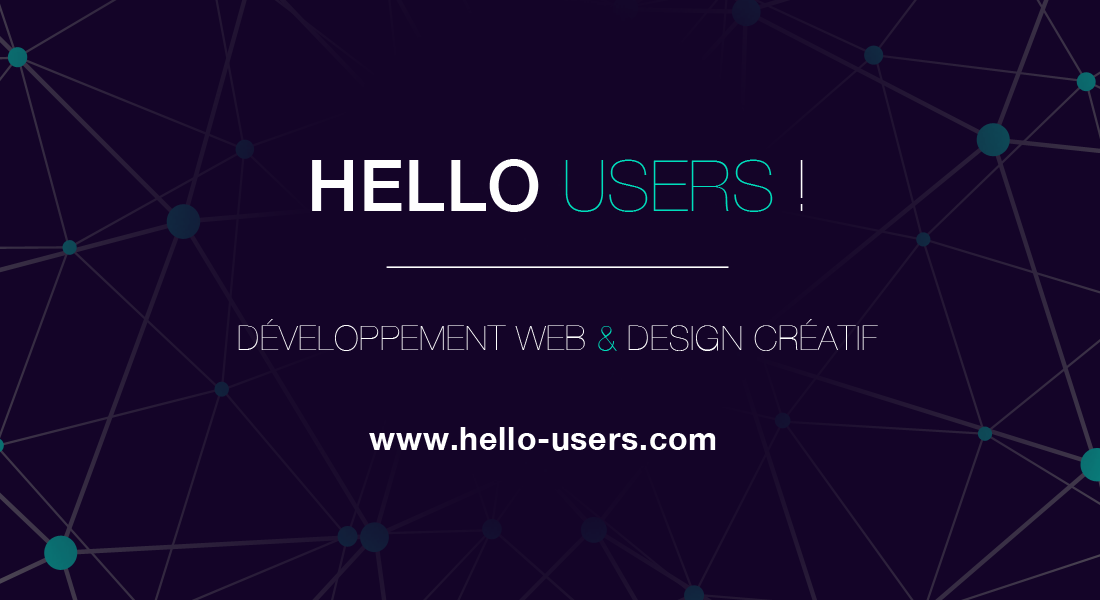
<style>
.page{position:relative;width:1100px;height:600px;background:#140428}
.page>*{position:absolute;margin:0}
.t1{font:71.1px "HelveticaNeue-Medium";letter-spacing:0.01em;color:#fefefe;text-transform:uppercase}
.t2{font:71.1px "HelveticaNeue-UltraLight";color:#00debc;text-transform:uppercase}
.t3{font:71.1px "HelveticaNeue-UltraLight";color:#fefefe;text-transform:uppercase}
.t4{font:33.8px "HelveticaNeue-UltraLight";letter-spacing:0.025em;color:#ffffff;text-transform:uppercase}
.t5{font:33.8px "HelveticaNeue-UltraLight";letter-spacing:0.025em;color:#00debc;text-transform:uppercase}
.t6{font:32px "HelveticaNeue-Bold";letter-spacing:0.025em;color:#ffffff}
</style>
<div class="page">
<p class="t1" style="left:312px;top:159px;width:491px;height:53px">HELLO <span class="t2">USERS </span><span class="t3">!</span></p>
<p class="t4" style="left:238px;top:319px;width:640px;height:32px">DÉVELOPPEMENT WEB <span class="t5">&amp;</span> DESIGN CRÉATIF</p>
<p class="t6" style="left:369px;top:427px;width:347px;height:24px">www.hello-users.com</p>
</div>
